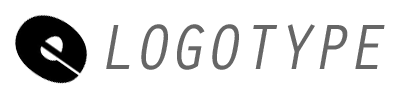
<style>
.page{position:relative;width:400px;height:100px;background:#ffffff}
.page>*{position:absolute;margin:0}
.t1{font:66px "OratorStd";letter-spacing:-0.065em;color:#666666;font-style:italic}
</style>
<div class="page">
<p class="t1" style="left:106px;top:24px;width:279px;height:46px">LOGOTYPE</p>
</div>
